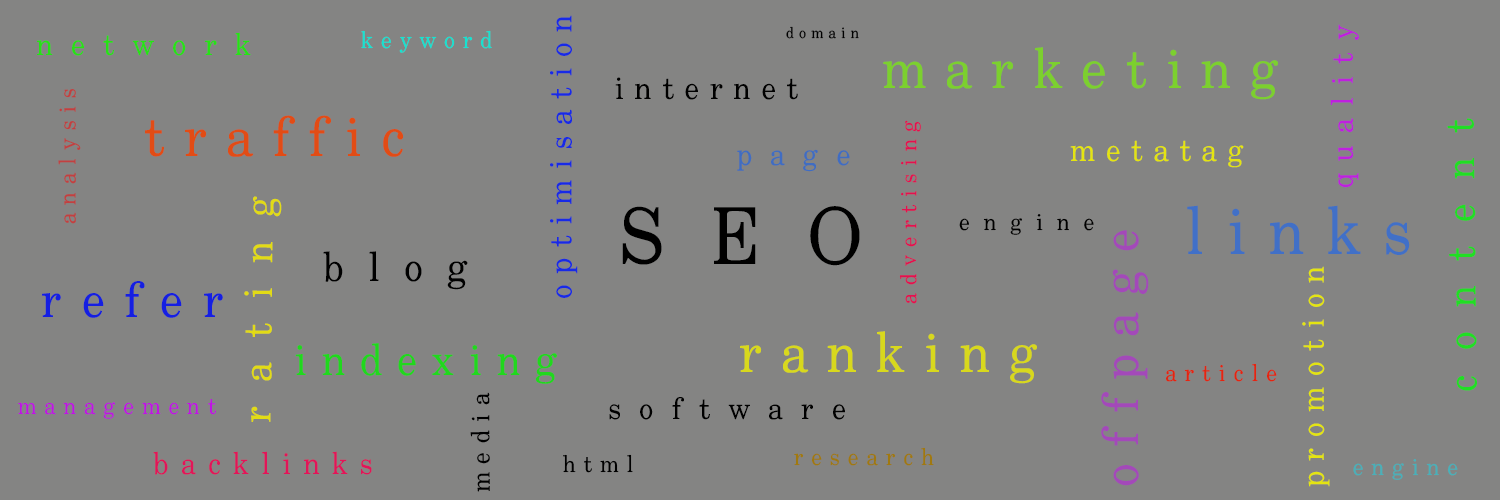
<style>
.page{position:relative;width:1500px;height:500px;background:#848483}
.page>*{position:absolute;margin:0}
.t1{font:31px "DDC_Uchen";letter-spacing:0.34em;color:#182ae7}
.t2{font:23px "DDC_Uchen";letter-spacing:0.34em;color:#15e2d1}
.t3{font:15px "DDC_Uchen";letter-spacing:0.34em;color:#000000}
.t4{font:30px "DDC_Uchen";letter-spacing:0.4em;color:#bf20df}
.t5{font:30px "DDC_Uchen";letter-spacing:0.6em;color:#26e215}
.t6{font:55px "DDC_Uchen";letter-spacing:0.34em;color:#7cd02e}
.t7{font:31px "DDC_Uchen";letter-spacing:0.34em;color:#000000}
.t8{font:23px "DDC_Uchen";letter-spacing:0.34em;color:#c24040}
.t9{font:55px "DDC_Uchen";letter-spacing:0.34em;color:#e24c15}
.t10{font:22px "DDC_Uchen";letter-spacing:0.34em;color:#e41050}
.t11{font:40px "DDC_Uchen";letter-spacing:0.6em;color:#20df23}
.t12{font:30px "DDC_Uchen";letter-spacing:0.6em;color:#406dc2}
.t13{font:31px "DDC_Uchen";letter-spacing:0.34em;color:#e4e410}
.t14{font:40px "DDC_Uchen";letter-spacing:0.6em;color:#e2db15}
.t15{font:78px "DDC_Uchen";letter-spacing:0.6em;color:#000000}
.t16{font:65px "DDC_Uchen";letter-spacing:0.34em;color:#4170c7}
.t17{font:23px "DDC_Uchen";letter-spacing:0.6em;color:#000000}
.t18{font:50px "DDC_Uchen";letter-spacing:0.34em;color:#a349b9}
.t19{font:40px "DDC_Uchen";letter-spacing:0.6em;color:#000000}
.t20{font:31px "DDC_Uchen";letter-spacing:0.34em;color:#e4e411}
.t21{font:49px "DDC_Uchen";letter-spacing:0.4em;color:#151fe2}
.t22{font:55px "DDC_Uchen";letter-spacing:0.34em;color:#d8d81d}
.t23{font:43px "DDC_Uchen";letter-spacing:0.34em;color:#20d81d}
.t24{font:23px "DDC_Uchen";letter-spacing:0.34em;color:#e42510}
.t25{font:23px "DDC_Uchen";letter-spacing:0.34em;color:#bf15e2}
.t26{font:25px "DDC_Uchen";letter-spacing:0.34em;color:#000000}
.t27{font:30px "DDC_Uchen";letter-spacing:0.6em;color:#000000}
.t28{font:23px "DDC_Uchen";letter-spacing:0.34em;color:#a07910}
.t29{font:30px "DDC_Uchen";letter-spacing:0.4em;color:#e21559}
.t30{font:23px "DDC_Uchen";letter-spacing:0.34em;color:#000000}
.t31{font:23px "DDC_Uchen";letter-spacing:0.34em;color:#49b0b9}
</style>
<div class="page">
<p class="t1" style="left:550px;top:15px;width:28px;height:283px;rotate:-90deg">optimisation</p>
<p class="t2" style="left:361px;top:30px;width:131px;height:23px">keyword</p>
<p class="t3" style="left:786px;top:26px;width:73px;height:13px">domain</p>
<p class="t4" style="left:1330px;top:24px;width:29px;height:164px;rotate:-90deg">quality</p>
<p class="t5" style="left:37px;top:32px;width:214px;height:24px">network</p>
<p class="t6" style="left:883px;top:47px;width:395px;height:53px">marketing</p>
<p class="t7" style="left:615px;top:77px;width:183px;height:23px">internet</p>
<p class="t8" style="left:58px;top:89px;width:23px;height:135px;rotate:-90deg">analysis</p>
<p class="t9" style="left:145px;top:115px;width:259px;height:42px">traffic</p>
<p class="t10" style="left:899px;top:120px;width:22px;height:184px;rotate:-90deg">advertising</p>
<p class="t11" style="left:1447px;top:118px;width:30px;height:273px;rotate:-91deg">content</p>
<p class="t12" style="left:737px;top:149px;width:113px;height:23px">page</p>
<p class="t13" style="left:1070px;top:140px;width:174px;height:28px">metatag</p>
<p class="t14" style="left:244px;top:196px;width:38px;height:226px;rotate:-89deg">rating</p>
<p class="t15" style="left:622px;top:206px;width:238px;height:60px">SEO</p>
<p class="t16" style="left:1187px;top:205px;width:223px;height:50px">links</p>
<p class="t17" style="left:959px;top:214px;width:135px;height:21px">engine</p>
<p class="t18" style="left:1101px;top:230px;width:48px;height:256px;rotate:-90deg">offpage</p>
<p class="t19" style="left:323px;top:251px;width:145px;height:39px">blog</p>
<p class="t20" style="left:1302px;top:266px;width:28px;height:221px;rotate:-90deg">promotion</p>
<p class="t21" style="left:42px;top:281px;width:181px;height:37px">refer</p>
<p class="t22" style="left:740px;top:331px;width:297px;height:53px">ranking</p>
<p class="t23" style="left:295px;top:343px;width:262px;height:41px">indexing</p>
<p class="t24" style="left:1165px;top:363px;width:112px;height:19px">article</p>
<p class="t25" style="left:18px;top:398px;width:199px;height:21px">management</p>
<p class="t26" style="left:470px;top:392px;width:20px;height:100px;rotate:-90deg">media</p>
<p class="t27" style="left:609px;top:397px;width:236px;height:23px">software</p>
<p class="t28" style="left:794px;top:447px;width:140px;height:19px">research</p>
<p class="t29" style="left:153px;top:451px;width:219px;height:24px">backlinks</p>
<p class="t30" style="left:563px;top:454px;width:70px;height:19px">html</p>
<p class="t31" style="left:1353px;top:459px;width:105px;height:21px">engine</p>
</div>
